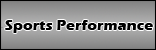
<style>
.page{position:relative;width:156px;height:50px}
.page>*{position:absolute;margin:0}
.t1{font:15px "ErasITC-Bold";color:#000000}
</style>
<div class="page">
<p class="t1" style="left:5px;top:20px;width:148px;height:13px">Sports Performance</p>
</div>
